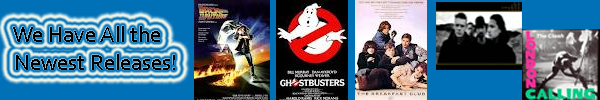
<style>
.page{position:relative;width:600px;height:100px;background:#0070b7}
.page>*{position:absolute;margin:0}
.t1{font:23px "Corbel";color:#000000}
</style>
<div class="page">
<p class="t1" style="left:13px;top:26px;width:162px;height:44px">We Have All the <br>Newest Releases!</p>
</div>
